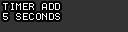
<style>
.page{position:relative;width:128px;height:32px;background:#333333}
.page>*{position:absolute;margin:0}
.t1{font:8px/10px "Terminal";letter-spacing:0.2em;color:#ffffff}
</style>
<div class="page">
<p class="t1" style="left:3px;top:3px;width:57px;height:17px;text-align:center">TIMER ADD<br>5 SECONDS</p>
</div>
